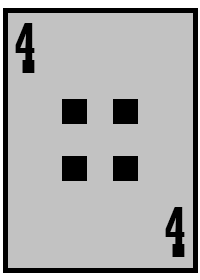
<style>
.page{position:relative;width:200px;height:280px;background:#c2c2c2}
.page>*{position:absolute;margin:0}
.t1{font:75px "Playbill";color:#000000}
</style>
<div class="page">
<p class="t1" style="left:15px;top:23px;width:20px;height:50px">4</p>
<p class="t1" style="left:165px;top:207px;width:20px;height:50px">4</p>
</div>
